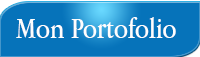
<style>
.page{position:relative;width:200px;height:57px;background:#0673ba}
.page>*{position:absolute;margin:0}
.t1{font:30px "AppleGaramond";color:#fefefe}
</style>
<div class="page">
<p class="t1" style="left:16px;top:17px;width:160px;height:21px">Mon Portofolio</p>
</div>
